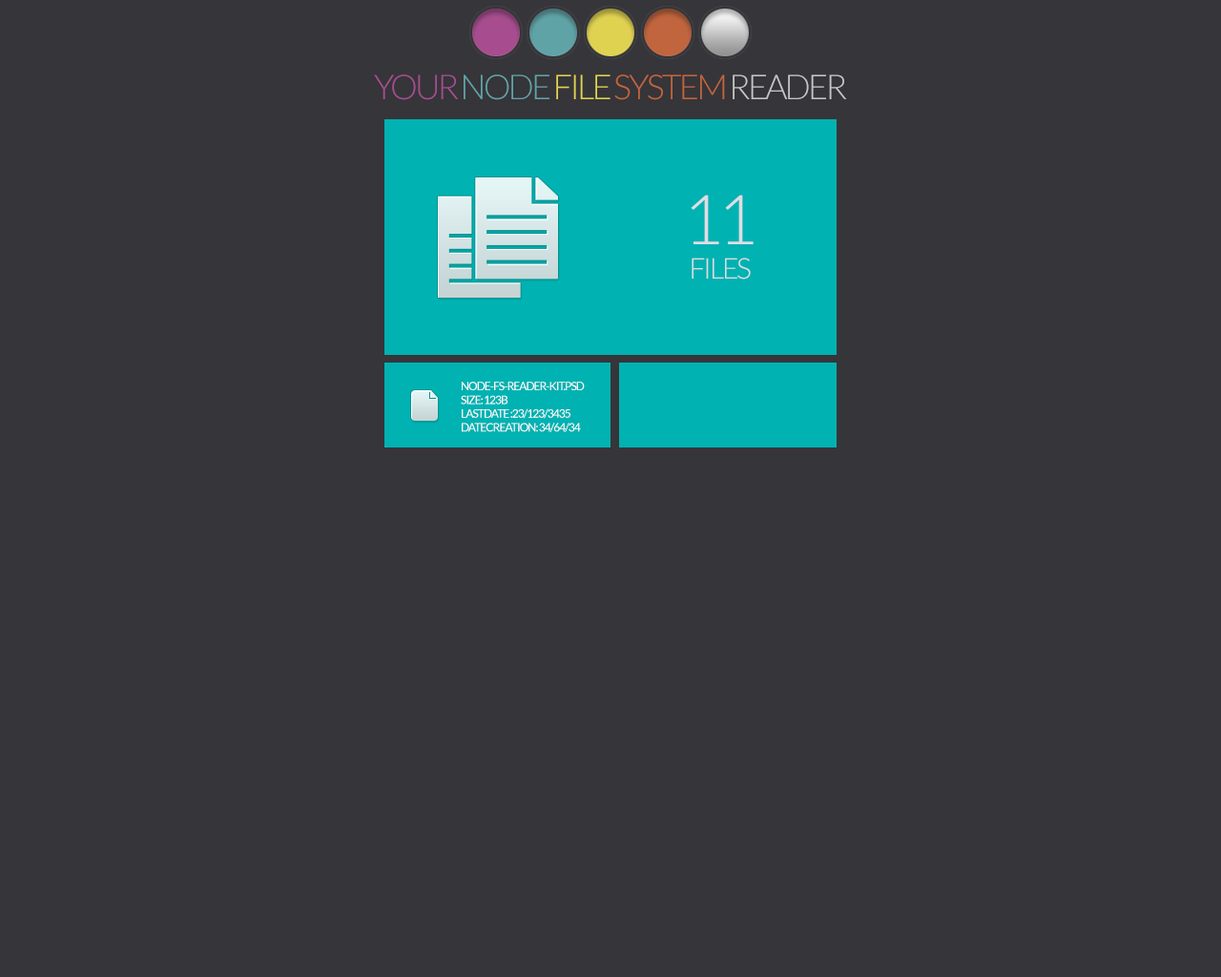
<style>
.page{position:relative;width:1221px;height:977px;background:#363539}
.page>*{position:absolute;margin:0}
.t1{font:34.3px "Lato-Light";letter-spacing:-0.08em;color:#c1653e;text-transform:uppercase}
.t2{font:34.3px "Lato-Light";letter-spacing:-0.08em;color:#a74d8f;text-transform:uppercase}
.t3{font:34.3px "Lato-Light";letter-spacing:-0.08em;color:#60a3a7;text-transform:uppercase}
.t4{font:34.3px "Lato-Light";letter-spacing:-0.08em;color:#e0d251;text-transform:uppercase}
.t5{font:34.3px "Lato-Light";letter-spacing:-0.08em;color:#c5c5c5;text-transform:uppercase}
.t6{font:28.6px "Lato-Light";letter-spacing:-0.08em;color:#dcdee4;text-transform:uppercase}
.t7{font:68.7px "Lato-Light";letter-spacing:-0.08em;color:#dcdee4;text-transform:uppercase}
.t8{font:11.4px "Lato-Regular";letter-spacing:-0.08em;color:#ffffff;text-transform:uppercase}
</style>
<div class="page">
<p class="t1" style="left:374px;top:74px;width:473px;height:26px"><span class="t2">your </span><span class="t3">node </span><span class="t4">file </span>system <span class="t5">reader</span></p>
<p class="t6" style="left:691px;top:195px;width:63px;height:84px;text-align:center"><span class="t7">11<br></span>files</p>
<p class="t8" style="left:461px;top:382px;width:124px;height:50px">node-fs-reader-kit.psd<br>size: 123b<br>lastdate :23/123/3435<br>datecreation: 34/64/34</p>
</div>
